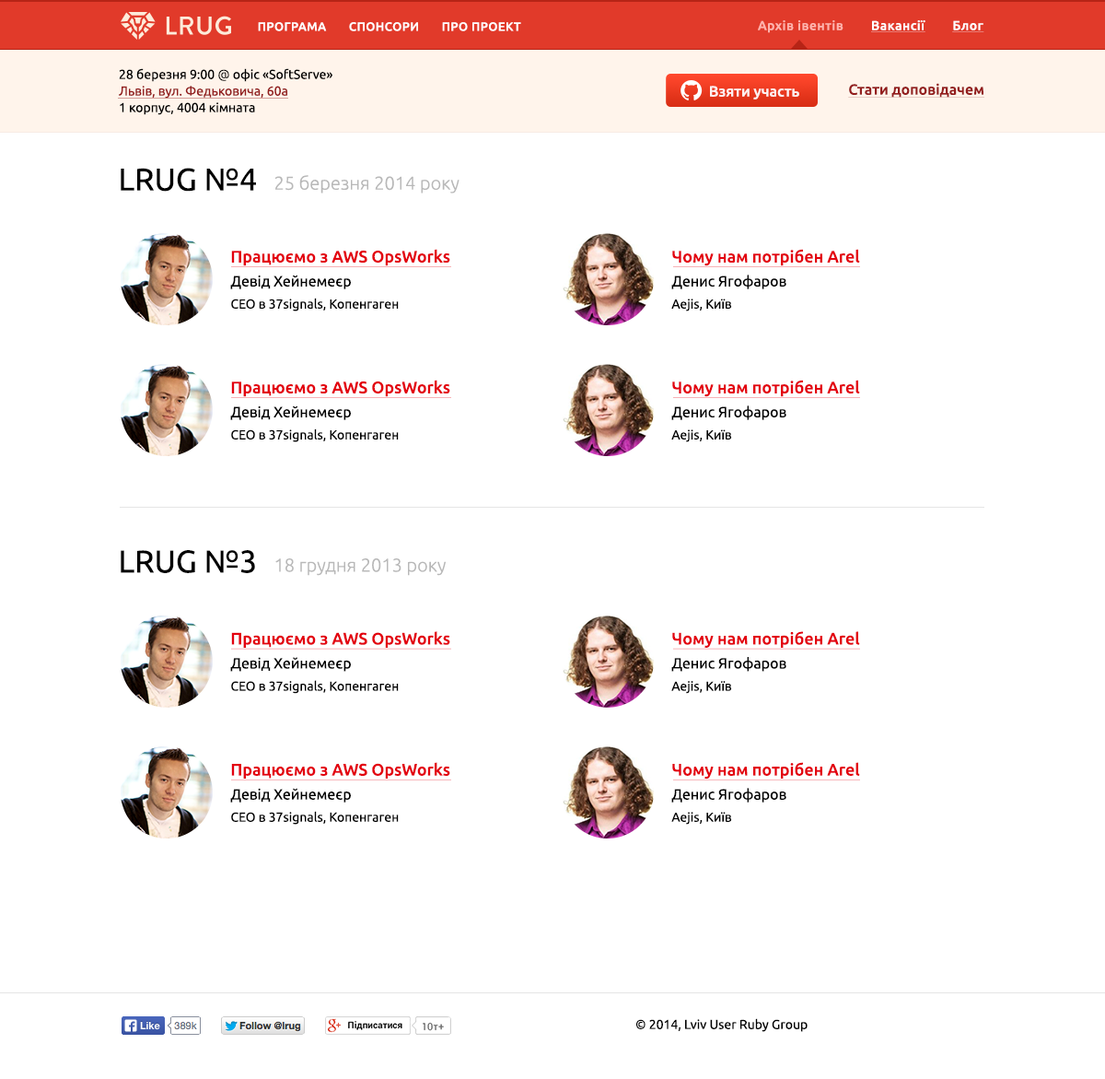
<style>
.page{position:relative;width:1105px;height:1079px;background:#ffffff}
.page>*{position:absolute;margin:0}
.t1{font:12px "Ubuntu-Medium";letter-spacing:0.034em;color:#ffffff;text-transform:uppercase}
.t2{font:12.9px "Ubuntu-Medium";letter-spacing:0.034em;color:#ffffff;text-decoration:underline}
.t3{font:12.9px "Ubuntu-Medium";letter-spacing:0.034em;color:#ffb3ac}
.t4{font:12.9px/16.6px "Ubuntu";color:#931d1d}
.t5{font:12.9px/16.6px "Ubuntu";color:#000000}
.t6{font:12.9px/16.6px "Ubuntu-Light";color:#000000}
.t7{font:14.7px "Ubuntu-Medium";color:#ffffff}
.t8{font:14.7px "Ubuntu-Medium";color:#931d1d;text-decoration:underline}
.t9{font:31.3px "Ubuntu";color:#000000}
.t10{font:18.4px "Ubuntu-Light";color:#b8b8b8}
.t11{font:16.6px "Ubuntu-Medium";color:#e3000e}
.t12{font:14.7px "Ubuntu";color:#000000}
.t13{font:12.9px "Ubuntu";color:#000000}
.t14{font:31.4px "Ubuntu";color:#000000}
.t15{font:14.8px "Ubuntu";color:#000000}
</style>
<div class="page">
<p class="t1" style="left:258px;top:22px;width:263px;height:9px">Програма       Спонсори       Про проект</p>
<p class="t2" style="left:758px;top:20px;width:227px;height:13px"><span class="t3">Архів івентів        </span>Вакансії        Блог</p>
<p class="t4" style="left:119px;top:68px;width:214px;height:47px"><span class="t5">28 березня 9:00 </span><span class="t6">@ </span><span class="t5">офіс «SoftServe»<br></span>Львів, вул. Федьковича, 60а<br><span class="t5">1 корпус, 4004 кімната</span></p>
<p class="t7" style="left:710px;top:86px;width:90px;height:13px;opacity:0.9">Взяти участь</p>
<p class="t8" style="left:848px;top:83px;width:137px;height:15px">Стати доповідачем</p>
<p class="t9" style="left:121px;top:168px;width:135px;height:24px">LRUG №4</p>
<p class="t10" style="left:275px;top:175px;width:185px;height:18px">25 березня 2014 року</p>
<p class="t11" style="left:231px;top:249px;width:219px;height:17px">Працюємо з AWS OpsWorks</p>
<p class="t11" style="left:672px;top:249px;width:188px;height:17px">Чому нам потрібен Arel</p>
<p class="t12" style="left:230px;top:275px;width:121px;height:14px">Девід Хейнемеєр</p>
<p class="t12" style="left:672px;top:275px;width:115px;height:14px">Денис Ягофаров</p>
<p class="t13" style="left:231px;top:298px;width:168px;height:13px">CEO в 37signals, Копенгаген</p>
<p class="t13" style="left:672px;top:298px;width:60px;height:13px">Aejis, Київ</p>
<p class="t11" style="left:231px;top:380px;width:219px;height:17px">Працюємо з AWS OpsWorks</p>
<p class="t11" style="left:672px;top:380px;width:188px;height:17px">Чому нам потрібен Arel</p>
<p class="t12" style="left:230px;top:405px;width:121px;height:15px">Девід Хейнемеєр</p>
<p class="t12" style="left:672px;top:405px;width:115px;height:15px">Денис Ягофаров</p>
<p class="t13" style="left:231px;top:428px;width:168px;height:14px">CEO в 37signals, Копенгаген</p>
<p class="t13" style="left:672px;top:429px;width:60px;height:13px">Aejis, Київ</p>
<p class="t14" style="left:121px;top:550px;width:134px;height:23px">LRUG №3</p>
<p class="t10" style="left:275px;top:558px;width:171px;height:18px">18 грудня 2013 року</p>
<p class="t11" style="left:231px;top:631px;width:219px;height:17px">Працюємо з AWS OpsWorks</p>
<p class="t11" style="left:672px;top:631px;width:188px;height:17px">Чому нам потрібен Arel</p>
<p class="t15" style="left:230px;top:657px;width:121px;height:15px">Девід Хейнемеєр</p>
<p class="t15" style="left:672px;top:657px;width:115px;height:15px">Денис Ягофаров</p>
<p class="t13" style="left:231px;top:680px;width:168px;height:14px">CEO в 37signals, Копенгаген</p>
<p class="t13" style="left:672px;top:681px;width:60px;height:13px">Aejis, Київ</p>
<p class="t11" style="left:231px;top:762px;width:219px;height:16px">Працюємо з AWS OpsWorks</p>
<p class="t11" style="left:672px;top:762px;width:188px;height:17px">Чому нам потрібен Arel</p>
<p class="t15" style="left:230px;top:788px;width:121px;height:14px">Девід Хейнемеєр</p>
<p class="t15" style="left:672px;top:788px;width:115px;height:14px">Денис Ягофаров</p>
<p class="t13" style="left:231px;top:811px;width:168px;height:13px">CEO в 37signals, Копенгаген</p>
<p class="t13" style="left:672px;top:812px;width:60px;height:12px">Aejis, Київ</p>
<p class="t13" style="left:636px;top:1018px;width:172px;height:14px">© 2014, Lviv User Ruby Group</p>
</div>
